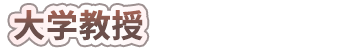
<style>
.page{position:relative;width:360px;height:50px;background:#ffffff}
.page>*{position:absolute;margin:0}
.t1{font:32px "SourceHanSansSC-Bold";color:#77544d;font-weight:bold}
</style>
<div class="page">
<p class="t1" style="left:14px;top:9px;width:129px;height:32px">大学教授</p>
</div>
